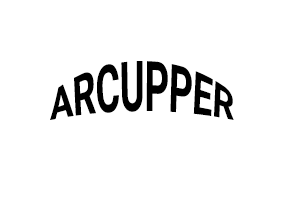
<style>
.page{position:relative;width:300px;height:200px;background:#ffffff}
.page>*{position:absolute;margin:0}
.t1{font:36px "Roboto-Bold";color:#000000}
</style>
<div class="page">
<p class="t1" style="left:50px;top:61px;width:184px;height:59px">ARCUPPER</p>
</div>
